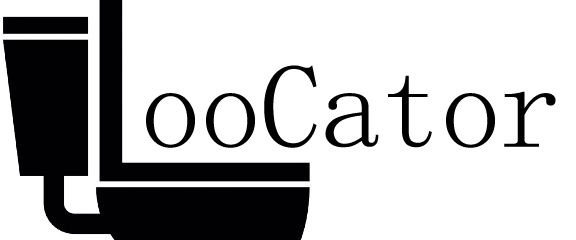
<style>
.page{position:relative;width:576px;height:240px;background:#ffffff}
.page>*{position:absolute;margin:0}
.t1{font:120px "SimSun-ExtB";color:#000000}
</style>
<div class="page">
<p class="t1" style="left:146px;top:65px;width:410px;height:83px">ooCator</p>
</div>
